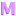
<style>
.page{position:relative;width:16px;height:16px;background:#ffffff}
.page>*{position:absolute;margin:0}
.t1{font:18.2px "LucidaSans-Demi";color:#dc9fff}
.t2{font:16.7px "LucidaSans-Demi";color:#dc9fff}
</style>
<div class="page">
<p class="t1" style="left:1px;top:2px;width:14px;height:13px">M</p>
<p class="t2" style="left:1px;top:2px;width:14px;height:12px">M</p>
</div>
